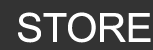
<style>
.page{position:relative;width:153px;height:50px;background:#333333}
.page>*{position:absolute;margin:0}
.t1{font:40px "ArialMT";letter-spacing:-0.01em;color:#ffffff}
</style>
<div class="page">
<p class="t1" style="left:18px;top:12px;width:133px;height:31px">STORE</p>
</div>
